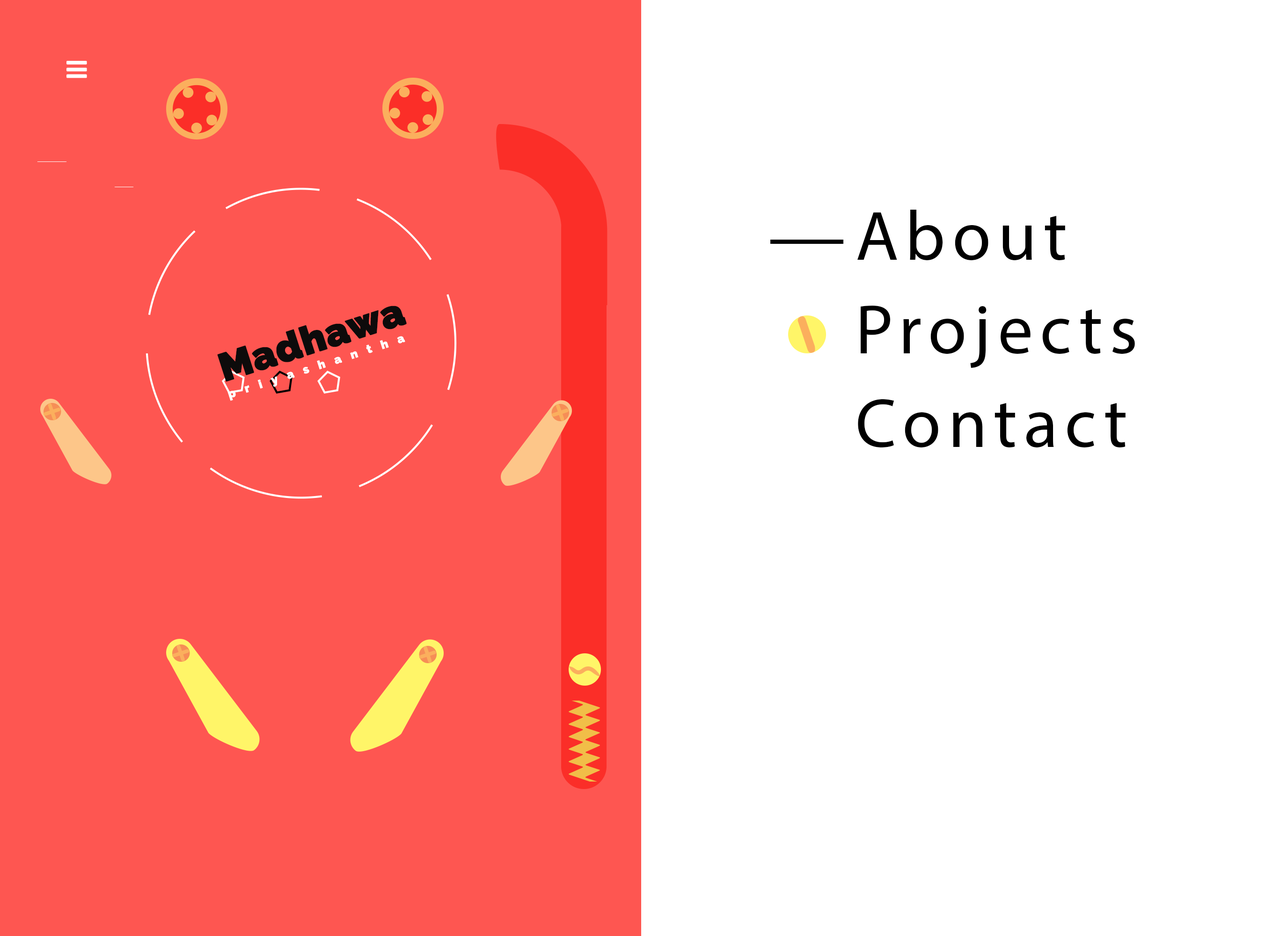
<style>
.page{position:relative;width:1273px;height:936px;background:#ffffff}
.page>*{position:absolute;margin:0}
.t1{font:70.2px "MyriadPro-Regular";letter-spacing:0.1em;color:#000000}
.t2{font:11.7px/17.6px "Raleway-Black";letter-spacing:0.82em;color:#ffffff;font-weight:bold}
.t3{font:39px/17.6px "Raleway-Black";color:#0d0b0b;font-weight:bold}
</style>
<div class="page">
<p class="t1" style="left:858px;top:210px;width:208px;height:51px">About</p>
<p class="t2" style="left:217px;top:306px;width:190px;height:95px;rotate:-18deg"><span class="t3">Madhawa<br></span>priyashantha</p>
<p class="t1" style="left:861px;top:306px;width:274px;height:62px">Projects</p>
<p class="t1" style="left:858px;top:399px;width:268px;height:49px">Contact</p>
</div>
